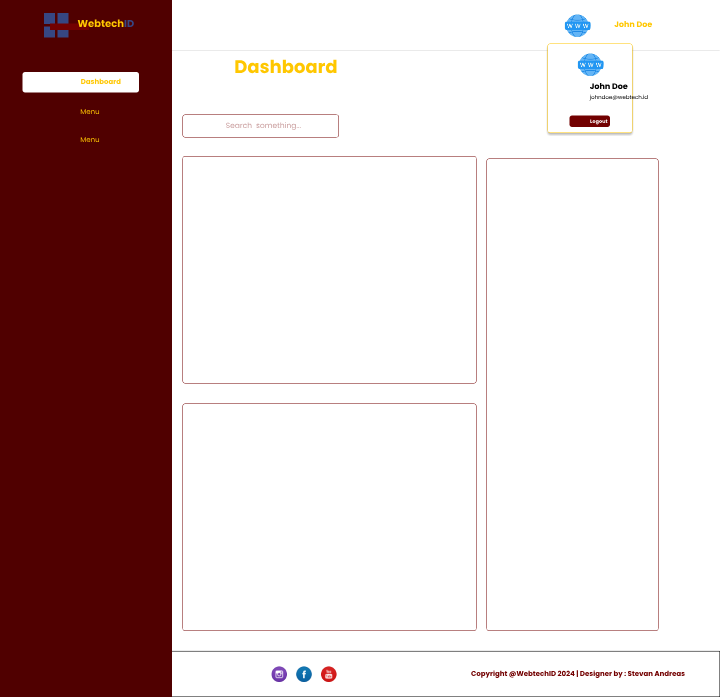
<style>
.page{position:relative;width:720px;height:697px;background:#ffffff}
.page>*{position:absolute;margin:0}
.t1{font:10px "Poppins-Bold";color:#ffc700}
.t2{font:10px "Poppins-Bold";color:#364784}
.t3{font:8px "Poppins-Bold";color:#ffc700}
.t4{font:18px "Poppins-Bold";color:#ffc700}
.t5{font:7px "Poppins-Bold";color:#ffc700}
.t6{font:8px "Poppins-Bold";color:#000000}
.t7{font:5.5px "Poppins-Regular"}
.t8{font:7px "Poppins-Regular"}
.t9{font:7.5px "Poppins-Regular"}
.t10{font:5px "Poppins-Bold";color:#ffffff}
.t11{font:7px "Poppins-Bold";color:#730000}
</style>
<div class="page">
<p class="t1" style="left:77px;top:19px;width:57px;height:9px">Webtech<span class="t2">ID</span></p>
<p class="t3" style="left:614px;top:21px;width:39px;height:7px">John Doe</p>
<p class="t4" style="left:235px;top:59px;width:102px;height:15px">Dashboard</p>
<p class="t5" style="left:81px;top:78px;width:40px;height:7px">Dashboard</p>
<p class="t6" style="left:589px;top:83px;width:39px;height:7px">John Doe</p>
<p class="t7" style="left:589px;top:94px;width:59px;height:7px">johndoe@webtech.id</p>
<p class="t8" style="left:80px;top:109px;width:20px;height:6px">Menu</p>
<p class="t9" style="left:226px;top:122px;width:75px;height:9px">Search  something...</p>
<p class="t10" style="left:590px;top:119px;width:18px;height:6px">Logout</p>
<p class="t8" style="left:80px;top:137px;width:20px;height:6px">Menu</p>
<p class="t11" style="left:471px;top:670px;width:214px;height:8px">Copyright @WebtechID 2024 | Designer by : Stevan Andreas</p>
</div>
